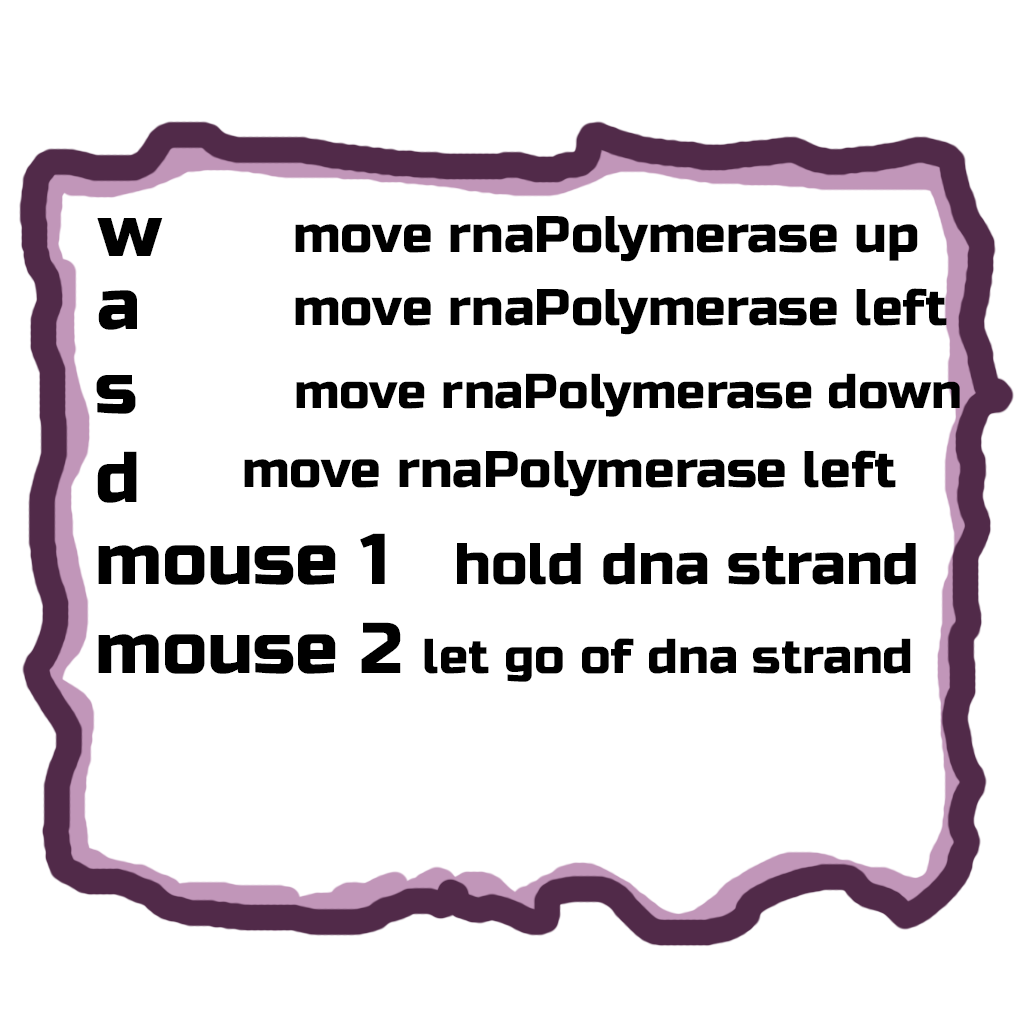
<style>
.page{position:relative;width:1024px;height:1024px;background:#ffffff}
.page>*{position:absolute;margin:0}
.t1{font:71.7px "RussoOne-Regular";color:#000000}
.t2{font:51.4px "RussoOne-Regular";color:#000000}
.t3{font:48.7px "RussoOne-Regular";color:#000000}
.t4{font:58.5px "RussoOne-Regular";color:#000000}
</style>
<div class="page">
<p class="t1" style="left:97px;top:218px;width:66px;height:38px">w</p>
<p class="t2" style="left:295px;top:216px;width:623px;height:46px">move rnaPolymerase up</p>
<p class="t1" style="left:98px;top:290px;width:39px;height:40px">a</p>
<p class="t2" style="left:295px;top:288px;width:652px;height:47px">move rnaPolymerase left</p>
<p class="t1" style="left:96px;top:375px;width:40px;height:39px">s</p>
<p class="t3" style="left:296px;top:373px;width:664px;height:44px">move rnaPolymerase down</p>
<p class="t1" style="left:97px;top:451px;width:40px;height:52px">d</p>
<p class="t2" style="left:244px;top:450px;width:652px;height:47px">move rnaPolymerase left</p>
<p class="t1" style="left:98px;top:533px;width:287px;height:52px">mouse 1</p>
<p class="t4" style="left:457px;top:543px;width:459px;height:42px">hold dna strand</p>
<p class="t1" style="left:98px;top:622px;width:303px;height:52px">mouse 2</p>
<p class="t3" style="left:424px;top:638px;width:487px;height:44px">let go of dna strand</p>
</div>
